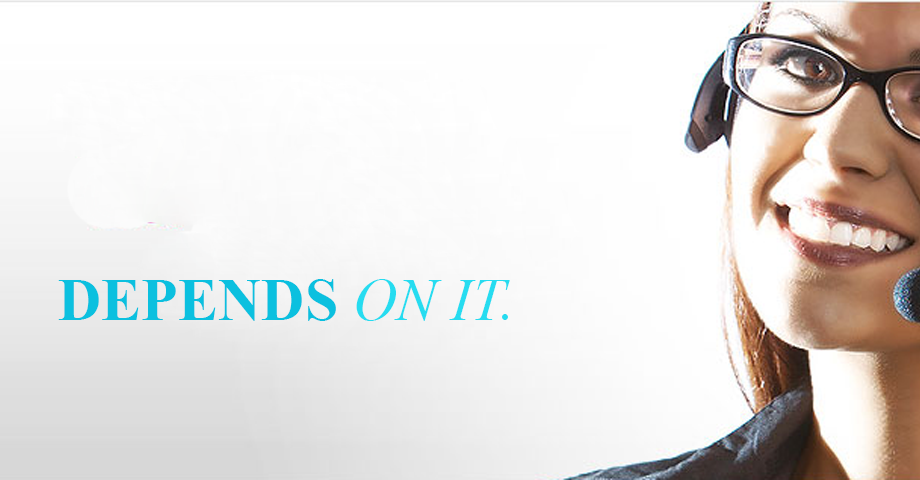
<style>
.page{position:relative;width:920px;height:480px}
.page>*{position:absolute;margin:0}
.t1{font:60px "TimesNewRomanPS-BoldMT";color:#0bc0df;text-transform:uppercase}
.t2{font:60px "TimesNewRomanPS-ItalicMT";color:#26dcf0;text-transform:uppercase}
</style>
<div class="page">
<p class="t1" style="left:58px;top:279px;width:452px;height:42px">Depends<span class="t2"> on it.</span></p>
</div>
